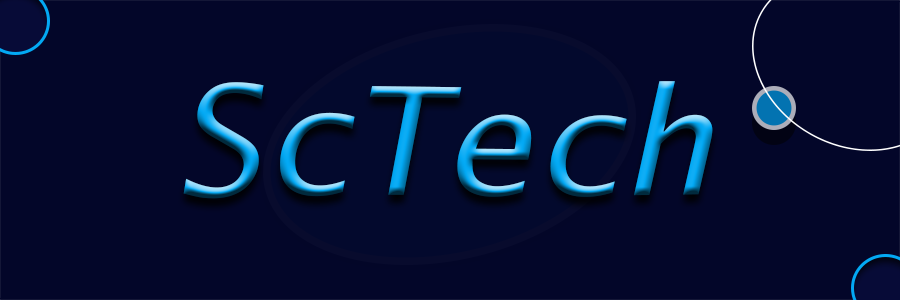
<style>
.page{position:relative;width:900px;height:300px;background:#030629}
.page>*{position:absolute;margin:0}
.t1{font:150px "LucidaSans-TypewriterOblique"}
</style>
<div class="page">
<p class="t1" style="left:183px;top:81px;width:530px;height:118px">ScTech</p>
</div>
